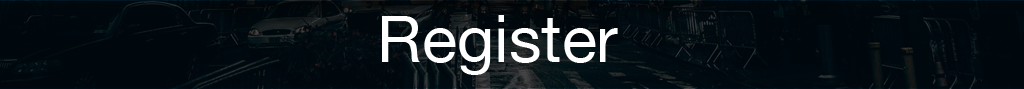
<style>
.page{position:relative;width:1024px;height:89px;background:#00080d}
.page>*{position:absolute;margin:0}
.t1{font:65px "HelveticaNeue";color:#ffffff}
</style>
<div class="page">
<p class="t1" style="left:382px;top:15px;width:236px;height:60px">Register</p>
</div>
